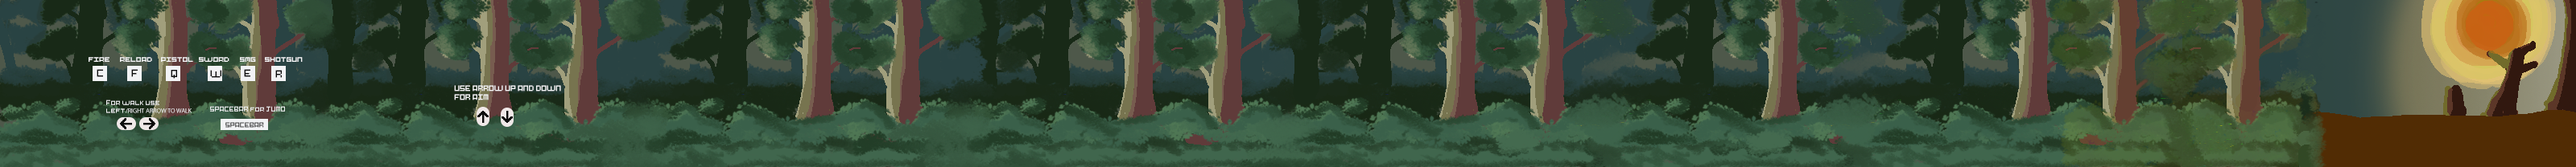
<style>
.page{position:relative;width:2576px;height:167px}
.page>*{position:absolute;margin:0}
.t1{font:7.2px "Pixel-Art";color:#f9f9fb}
.t2{font:9.7px "Pixel-Art";color:#080808}
.t3{font:6.4px "MyriadPro-Regular";color:#f2f3f5}
.t4{font:6.4px "Pixel-Art";color:#f2f3f5}
.t5{font:6.4px "Pixel-Art"}
</style>
<div class="page">
<p class="t1" style="left:89px;top:57px;width:20px;height:5px">fire</p>
<p class="t1" style="left:120px;top:57px;width:32px;height:5px">reload</p>
<p class="t1" style="left:161px;top:57px;width:32px;height:5px">pistol</p>
<p class="t1" style="left:199px;top:57px;width:30px;height:5px">sword</p>
<p class="t1" style="left:240px;top:57px;width:16px;height:5px">smg</p>
<p class="t1" style="left:265px;top:57px;width:38px;height:5px">shotgun</p>
<p class="t2" style="left:97px;top:69px;width:6px;height:8px">C</p>
<p class="t2" style="left:131px;top:69px;width:7px;height:8px">F</p>
<p class="t2" style="left:171px;top:70px;width:6px;height:9px">Q</p>
<p class="t2" style="left:210px;top:70px;width:11px;height:8px">W</p>
<p class="t2" style="left:244px;top:69px;width:6px;height:8px">E</p>
<p class="t2" style="left:275px;top:70px;width:7px;height:8px">R</p>
<p class="t1" style="left:454px;top:85px;width:107px;height:16px">USE ARROW UP AND DOWN<br>FOR AIM</p>
<p class="t3" style="left:106px;top:100px;width:86px;height:14px"><span class="t4">For walk use <br>left</span>/RIGHT ARROW TO WALK</p>
<p class="t4" style="left:210px;top:106px;width:75px;height:6px">SPACEBAR for JUMO</p>
<p class="t5" style="left:225px;top:122px;width:39px;height:6px">SPACEBAR</p>
</div>
